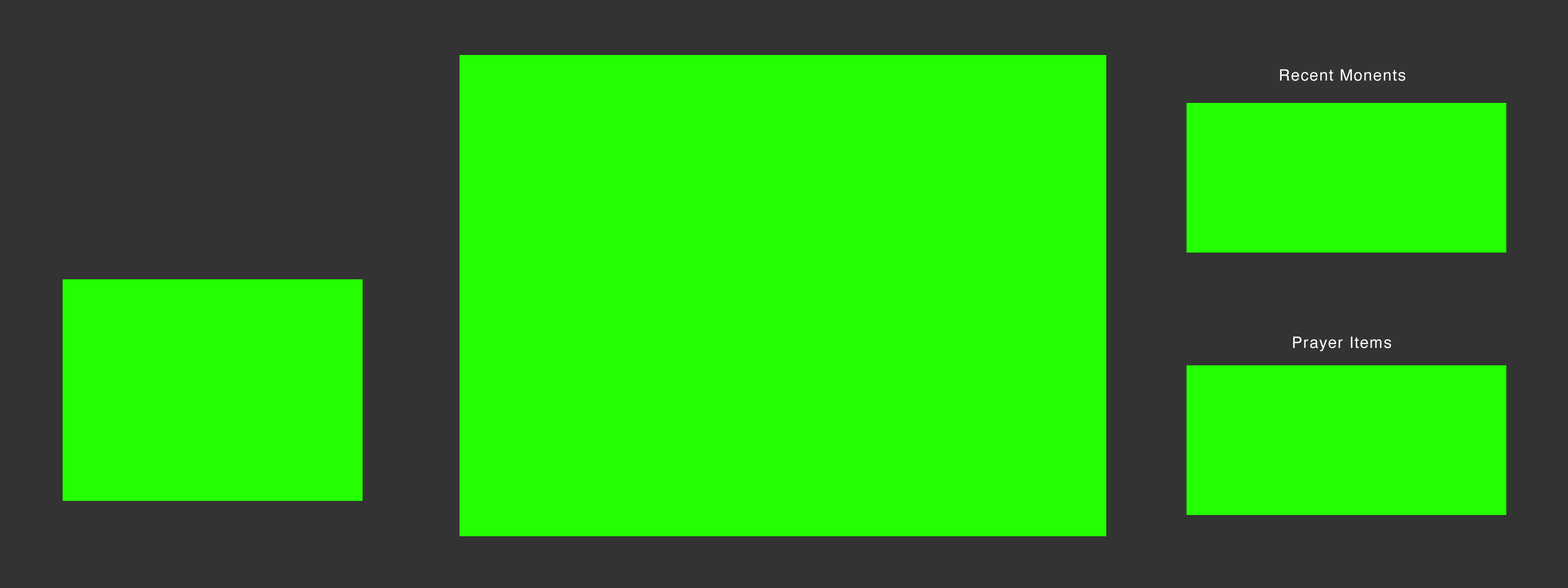
<style>
.page{position:relative;width:1568px;height:588px;background:#24ff02}
.page>*{position:absolute;margin:0}
.t1{font:15.8px "Helvetica";letter-spacing:0.06em;color:#ffffff}
</style>
<div class="page">
<p class="t1" style="left:1280px;top:69px;width:125px;height:12px">Recent Monents</p>
<p class="t1" style="left:1293px;top:336px;width:98px;height:15px">Prayer Items</p>
</div>
